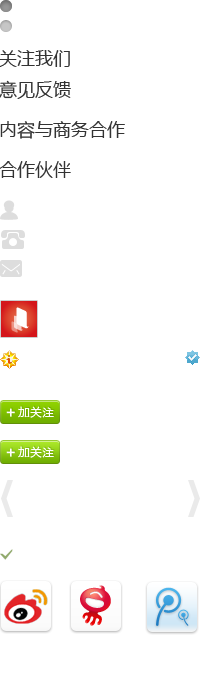
<style>
.page{position:relative;width:200px;height:700px;background:#ffffff}
.page>*{position:absolute;margin:0}
.t1{font:18px "MicrosoftYaHei";color:#333333}
.t2{font:12px "HiraginoSansGB-W3";color:#ffffff}
</style>
<div class="page">
<p class="t1" style="left:0px;top:50px;width:70px;height:17px">关注我们</p>
<p class="t1" style="left:0px;top:80px;width:71px;height:19px">意见反馈</p>
<p class="t1" style="left:0px;top:121px;width:125px;height:18px">内容与商务合作</p>
<p class="t1" style="left:0px;top:161px;width:71px;height:17px">合作伙伴</p>
<p class="t2" style="left:18px;top:406px;width:36px;height:12px">加关注</p>
<p class="t2" style="left:18px;top:446px;width:36px;height:12px">加关注</p>
</div>
